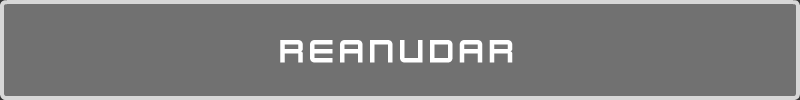
<style>
.page{position:relative;width:800px;height:100px;background:#717171}
.page>*{position:absolute;margin:0}
.t1{font:36px "KenVector-Future";color:#ffffff}
</style>
<div class="page">
<p class="t1" style="left:280px;top:40px;width:233px;height:23px">reanudar</p>
</div>
